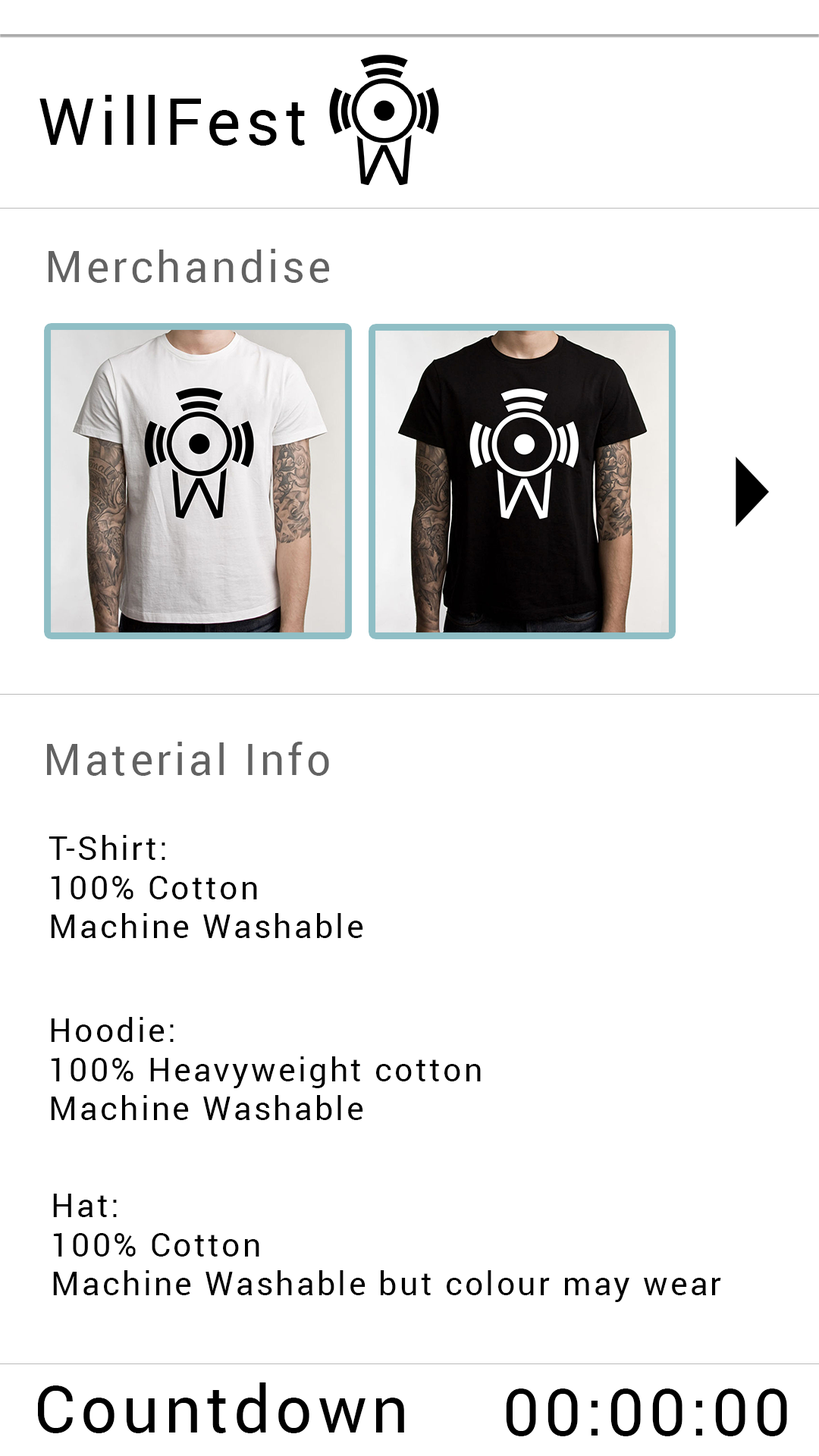
<style>
.page{position:relative;width:819px;height:1456px;background:#ffffff}
.page>*{position:absolute;margin:0}
.t1{font:65.2px "Roboto-Regular";letter-spacing:0.075em;color:#000000}
.t2{font:43.5px "Roboto-Regular";letter-spacing:0.075em;color:#626262}
.t3{font:32.6px "Roboto-Regular";letter-spacing:0.075em;color:#000000}
</style>
<div class="page">
<p class="t1" style="left:39px;top:95px;width:266px;height:51px">WillFest</p>
<p class="t2" style="left:49px;top:249px;width:280px;height:34px">Merchandise</p>
<p class="t2" style="left:47px;top:742px;width:282px;height:34px">Material Info</p>
<p class="t3" style="left:49px;top:835px;width:314px;height:103px">T-Shirt:<br>100% Cotton<br>Machine Washable</p>
<p class="t3" style="left:51px;top:1017px;width:430px;height:103px">Hoodie:<br>100% Heavyweight cotton<br>Machine Washable</p>
<p class="t3" style="left:53px;top:1194px;width:668px;height:108px">Hat:<br>100% Cotton<br>Machine Washable but colour may wear</p>
<p class="t1" style="left:38px;top:1382px;width:366px;height:51px">Countdown</p>
<p class="t1" style="left:506px;top:1388px;width:281px;height:48px">00:00:00</p>
</div>
